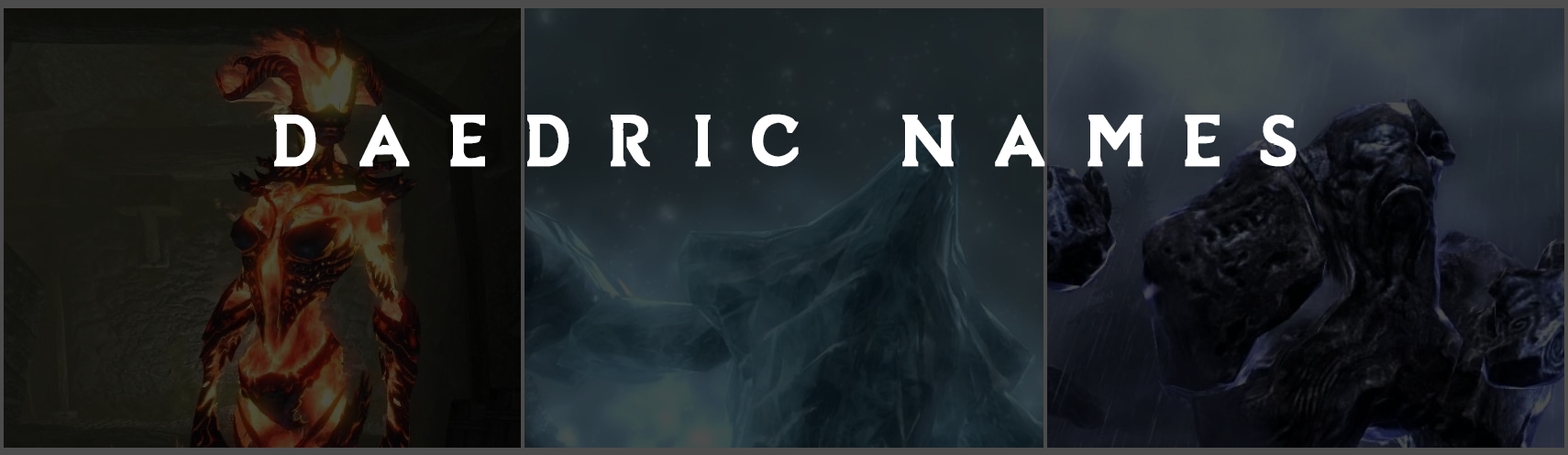
<style>
.page{position:relative;width:1568px;height:455px}
.page>*{position:absolute;margin:0}
.t1{font:91.7px "SovngardeLight";letter-spacing:0.4em;color:#ffffff;font-weight:bold}
</style>
<div class="page">
<p class="t1" style="left:274px;top:114px;width:1023px;height:53px">DAEDRIC NAMES</p>
</div>
